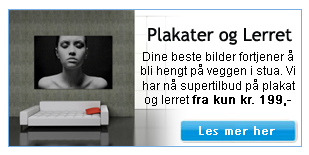
<style>
.page{position:relative;width:309px;height:155px;background:#ffffff}
.page>*{position:absolute;margin:0}
.t1{font:18px "TrebuchetMS";letter-spacing:-0.005em;color:#040608}
.t2{font:12px "ArialMT";color:#000000}
.t3{font:12px "ArialMT";color:#000000;font-weight:bold}
.t4{font:12px "TrebuchetMS";color:#fafbf8;font-weight:bold}
</style>
<div class="page">
<p class="t1" style="left:148px;top:27px;width:144px;height:18px">Plakater og Lerret</p>
<p class="t2" style="left:141px;top:50px;width:154px;height:56px;text-align:center">Dine beste bilder fortjener å<br>bli hengt på veggen i stua. Vi<br>har nå supertilbud på plakat<br>og lerret <span class="t3">fra kun kr. 199,-</span></p>
<p class="t4" style="left:199px;top:126px;width:76px;height:9px">Les mer her</p>
</div>
